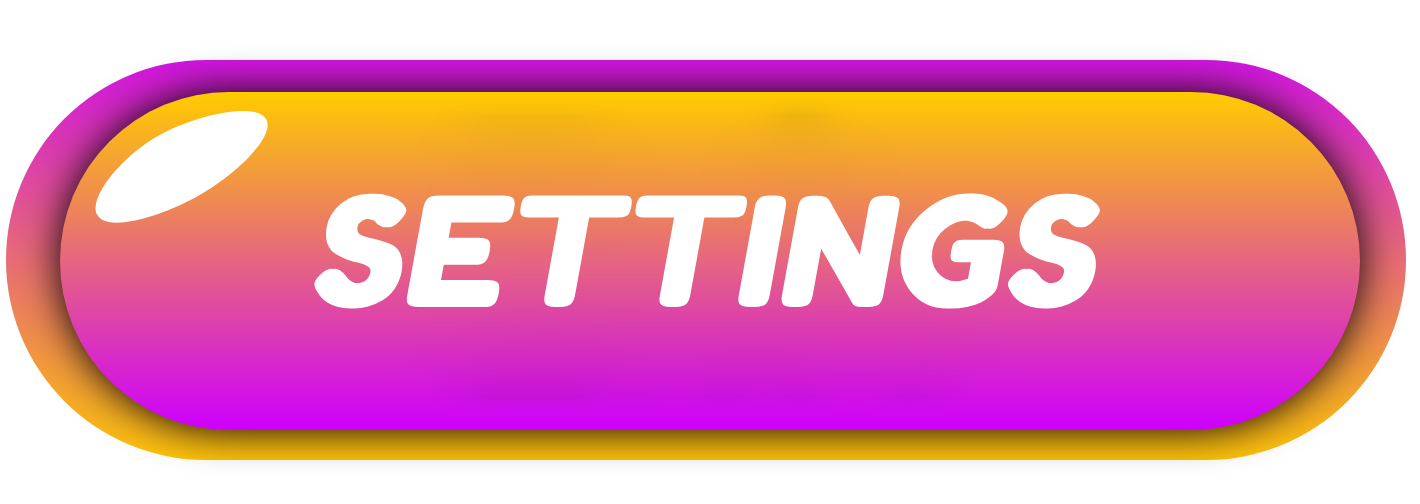
<style>
.page{position:relative;width:1420px;height:504px;background:#ffffff}
.page>*{position:absolute;margin:0}
.t1{font:152px "FredokaOne-Regular";color:#ffffff;font-weight:bold;font-style:italic}
</style>
<div class="page">
<p class="t1" style="left:313px;top:193px;width:788px;height:116px">SETTINGS</p>
</div>
